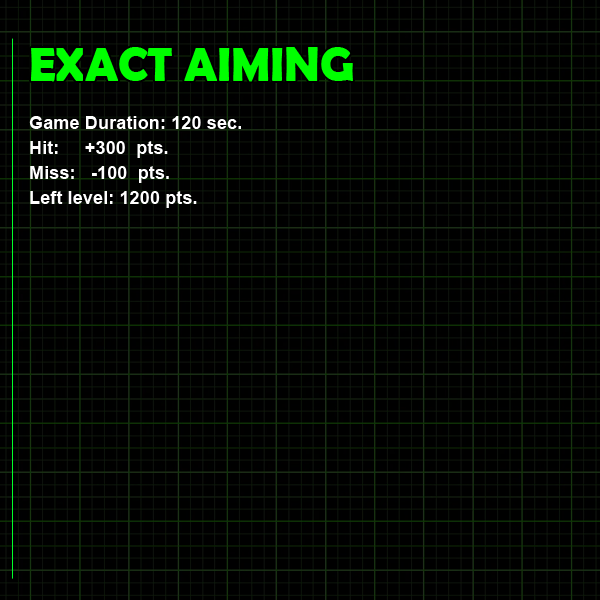
<style>
.page{position:relative;width:600px;height:600px;background:#000000}
.page>*{position:absolute;margin:0}
.t1{font:47.5px "BerlinSansFBDemi-Bold";color:#00ff00}
.t2{font:18.3px/25px "Arial-BoldMT";color:#ffffff}
</style>
<div class="page">
<p class="t1" style="left:31px;top:47px;width:322px;height:35px">EXACT AIMING</p>
<p class="t2" style="left:29px;top:116px;width:212px;height:92px">Game Duration: 120 sec.<br>Hit:     +300  pts.<br>Miss:   -100  pts.<br>Left level: 1200 pts.</p>
</div>
